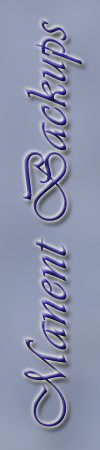
<style>
.page{position:relative;width:100px;height:450px}
.page>*{position:absolute;margin:0}
.t1{font:60px "Vivaldii";font-weight:bold}
</style>
<div class="page">
<p class="t1" style="left:23px;top:19px;width:59px;height:408px;rotate:-90deg">Manent Backups</p>
</div>
